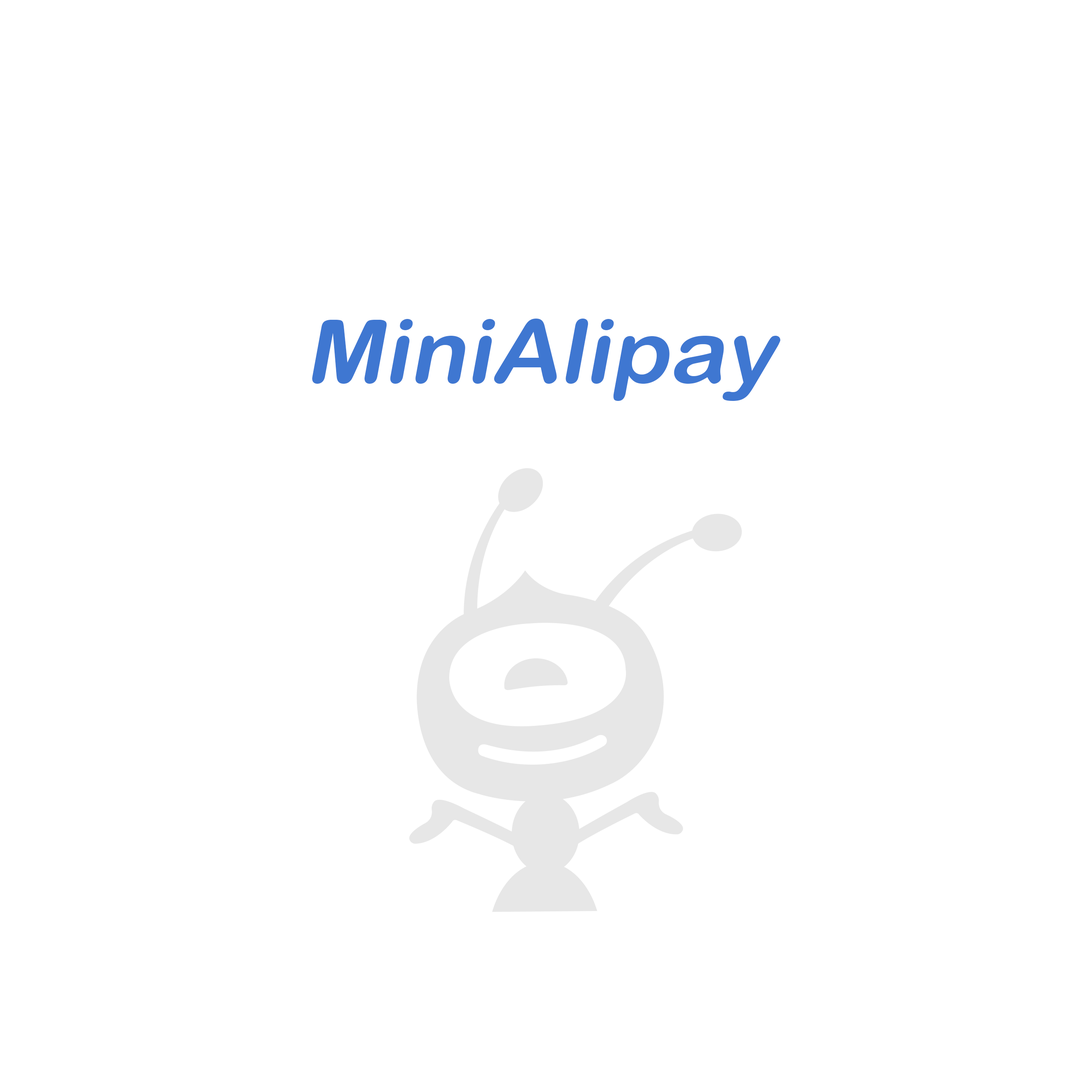
<style>
.page{position:relative;width:1092px;height:1092px;background:#ffffff}
.page>*{position:absolute;margin:0}
.t1{font:89.6px "ArialRoundedMTBold";color:#3f77d1;scale:1.05 1}
</style>
<div class="page">
<p class="t1" style="left:312px;top:319px;width:469px;height:82px">MiniAlipay</p>
</div>
